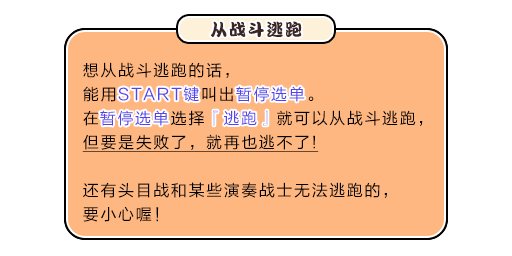
<style>
.page{position:relative;width:512px;height:256px;background:#ffb782}
.page>*{position:absolute;margin:0}
.t1{font:17px "DFPKanTingLiuW9";letter-spacing:0.1em;color:#3b2626}
.t2{font:16px/24px "FZLTHJW--GB1-0";letter-spacing:0.1em;color:#000000}
.t3{font:16px/24px "FZLTHJW--GB1-0";letter-spacing:0.1em;color:#5444ed}
.t4{font:16px/24px "FZLTHJW--GB1-0";letter-spacing:0.1em;color:#000000;text-decoration:underline}
.t5{font:16px "FZLTHJW--GB1-0";letter-spacing:0.1em;color:#5444ed}
</style>
<div class="page">
<p class="t1" style="left:210px;top:21px;width:92px;height:17px">从战斗逃跑</p>
<p class="t2" style="left:82px;top:62px;width:341px;height:160px">想从战斗逃跑的话，<br>能用<span class="t3">START键</span>叫出<span class="t3">暂停选单</span>。<br>在<span class="t3">暂停选单</span>选择<span class="t3">『逃跑』</span>就可以从战斗逃跑，<br><span class="t4">但要是失败了，就再也逃不了!<br></span><br>还有头目战和某些演奏战士无法逃跑的，<br>要小心喔！</p>
<p class="t5" style="left:118px;top:86px;width:81px;height:16px">START键</p>
<p class="t5" style="left:236px;top:86px;width:69px;height:16px">暂停选单</p>
<p class="t5" style="left:100px;top:110px;width:69px;height:16px">暂停选单</p>
<p class="t5" style="left:213px;top:110px;width:55px;height:16px">『逃跑』</p>
</div>
